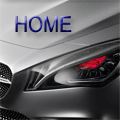
<style>
.page{position:relative;width:120px;height:120px}
.page>*{position:absolute;margin:0}
.t1{font:22px "ArialMT";scale:0.88 1}
</style>
<div class="page">
<p class="t1" style="left:15px;top:15px;width:57px;height:18px">HOME</p>
</div>
